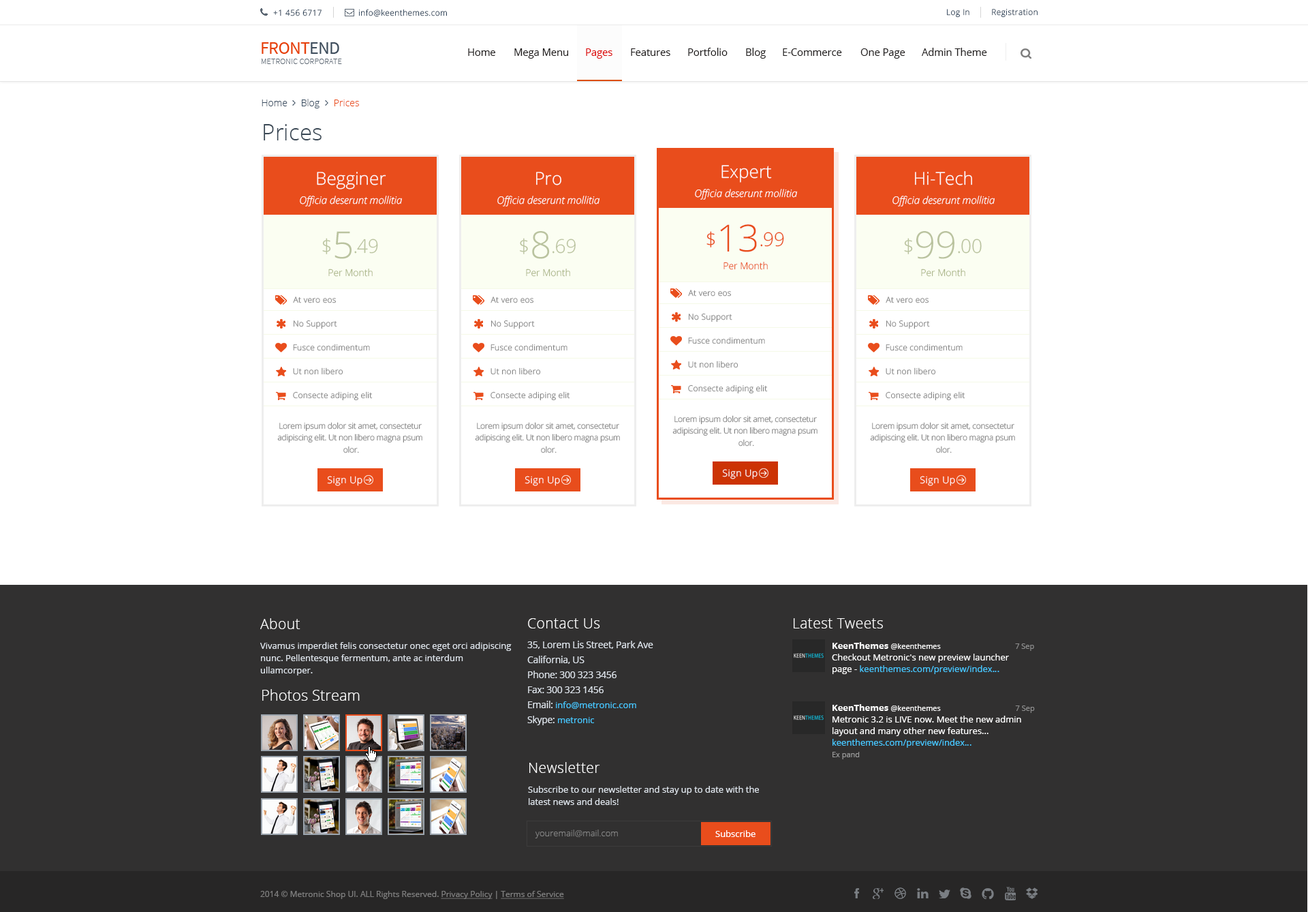
<style>
.page{position:relative;width:1308px;height:912px;background:#ffffff}
.page>*{position:absolute;margin:0}
.t1{font:8.2px "OpenSans-Light";letter-spacing:0.04em;color:#394c60}
.t2{font:10px "OpenSans";color:#1f1c1c}
.t3{font:10px "OpenSans";color:#dd0000}
.t4{font:9.5px "OpenSans-Light";color:#394c60}
.t5{font:9.5px "OpenSans-Light";color:#e94d1c}
.t6{font:22.5px "OpenSans-Light";color:#3a4855}
.t7{font:10.2px/19.1px "OpenSansLight-Italic";color:#fefefe}
.t8{font:17.7px "OpenSans-Light";color:#fefefe}
.t9{font:19.1px "OpenSans-Light";color:#bac39f}
.t10{font:19.1px "OpenSans-Light";letter-spacing:-0.02em;color:#bac39f}
.t11{font:37.5px "OpenSans-Light";color:#bac39f}
.t12{font:37.5px "OpenSans-Light";color:#e94d1c}
.t13{font:19.1px "OpenSans-Light";letter-spacing:-0.02em;color:#e94d1c}
.t14{font:19.1px "OpenSans-Light";color:#e94d1c}
.t15{font:9.5px "OpenSans-Light";color:#a9b486}
.t16{font:8.2px "OpenSans-Light";letter-spacing:0.02em;color:#888888}
.t17{font:8.2px "OpenSans-Light";color:#888888}
.t18{font:8.2px/12px "OpenSans-Light";letter-spacing:-0.02em;color:#888888}
.t19{font:9.5px "OpenSans-Light";letter-spacing:0.04em;color:#ffffff}
.t20{font:14.3px "OpenSans-Light";letter-spacing:0.02em;color:#fefefe}
.t21{font:14.3px "OpenSans-Light";letter-spacing:0.02em;color:#ffffff}
.t22{font:8.9px/12.3px "OpenSans";color:#dee4eb}
.t23{font:9.5px/15px "OpenSans";letter-spacing:-0.02em;color:#dee4eb}
.t24{font:8.9px/11.6px "OpenSans";color:#47c7ff}
.t25{font:8.9px/11.6px "OpenSans";color:#ffffff}
.t26{font:8.9px/11.6px "OpenSans-Bold";color:#ffffff}
.t27{font:7.5px/11.6px "OpenSans";color:#ffffff}
.t28{font:7.5px/11.6px "OpenSans";color:#8d8d8d}
.t29{font:15px "OpenSans-Light";color:#fefefe}
.t30{font:7.5px/11.6px "OpenSans";color:#999999}
.t31{font:8.9px "OpenSans-Light";color:#858585}
.t32{font:8.9px "OpenSans";color:#ffffff}
.t33{font:8.2px "OpenSans";color:#7f7f7f}
.t34{font:8.2px "OpenSans";color:#7f7f7f;text-decoration:underline}
</style>
<div class="page">
<p class="t1" style="left:273px;top:9px;width:174px;height:8px">+1 456 6717                info@keenthemes.com</p>
<p class="t1" style="left:947px;top:9px;width:91px;height:9px">Log In        Registration</p>
<p class="t2" style="left:468px;top:48px;width:27px;height:8px">Home</p>
<p class="t2" style="left:514px;top:48px;width:54px;height:11px">Mega Menu</p>
<p class="t3" style="left:586px;top:48px;width:26px;height:11px">Pages</p>
<p class="t2" style="left:631px;top:48px;width:39px;height:8px">Features</p>
<p class="t2" style="left:688px;top:48px;width:40px;height:8px">Portfolio</p>
<p class="t2" style="left:746px;top:48px;width:20px;height:11px">Blog</p>
<p class="t2" style="left:783px;top:48px;width:59px;height:8px">E-Commerce</p>
<p class="t2" style="left:860px;top:48px;width:45px;height:11px">One Page</p>
<p class="t2" style="left:922px;top:48px;width:65px;height:8px">Admin Theme</p>
<p class="t4" style="left:262px;top:99px;width:97px;height:9px">Home     Blog      <span class="t5">Prices</span></p>
<p class="t6" style="left:264px;top:124px;width:58px;height:16px">Prices</p>
<p class="t7" style="left:300px;top:172px;width:102px;height:34px;text-align:center"><span class="t8">Begginer<br></span>Officia deserunt mollitia</p>
<p class="t7" style="left:497px;top:172px;width:103px;height:34px;text-align:center"><span class="t8">Pro<br></span>Officia deserunt mollitia</p>
<p class="t7" style="left:695px;top:165px;width:102px;height:35px;text-align:center"><span class="t8">Expert<br></span>Officia deserunt mollitia</p>
<p class="t7" style="left:893px;top:171px;width:102px;height:35px;text-align:center"><span class="t8">Hi-Tech<br></span>Officia deserunt mollitia</p>
<p class="t9" style="left:322px;top:231px;width:56px;height:28px"><span class="t10">$</span><span class="t11">5</span>.49</p>
<p class="t9" style="left:520px;top:231px;width:56px;height:28px"><span class="t10">$</span><span class="t11">8</span>.69</p>
<p class="t12" style="left:707px;top:224px;width:77px;height:28px"><span class="t13">$</span>13<span class="t14">.</span><span class="t14">99</span></p>
<p class="t11" style="left:904px;top:231px;width:78px;height:28px"><span class="t10">$</span>99<span class="t9">.</span><span class="t9">00</span></p>
<p class="t15" style="left:328px;top:268px;width:45px;height:9px">Per Month</p>
<p class="t15" style="left:526px;top:268px;width:44px;height:9px">Per Month</p>
<p class="t5" style="left:724px;top:262px;width:44px;height:8px">Per Month</p>
<p class="t15" style="left:921px;top:268px;width:44px;height:9px">Per Month</p>
<p class="t16" style="left:688px;top:290px;width:43px;height:6px"><span class="t17"> </span>At vero eos</p>
<p class="t16" style="left:293px;top:296px;width:43px;height:7px"><span class="t17"> </span>At vero eos</p>
<p class="t16" style="left:491px;top:296px;width:42px;height:7px"><span class="t17"> </span>At vero eos</p>
<p class="t16" style="left:886px;top:296px;width:43px;height:7px"><span class="t17"> </span>At vero eos</p>
<p class="t16" style="left:689px;top:313px;width:43px;height:9px"><span class="t17"> </span> No Support</p>
<p class="t16" style="left:294px;top:320px;width:43px;height:9px"><span class="t17"> </span> No Support</p>
<p class="t16" style="left:491px;top:320px;width:44px;height:9px"><span class="t17"> </span> No Support</p>
<p class="t16" style="left:886px;top:320px;width:44px;height:9px"><span class="t17"> </span> No Support</p>
<p class="t16" style="left:688px;top:337px;width:77px;height:7px">Fusce condimentum</p>
<p class="t16" style="left:293px;top:343px;width:77px;height:8px">Fusce condimentum</p>
<p class="t16" style="left:491px;top:343px;width:77px;height:8px">Fusce condimentum</p>
<p class="t16" style="left:886px;top:343px;width:77px;height:8px">Fusce condimentum</p>
<p class="t16" style="left:688px;top:360px;width:50px;height:8px">Ut non libero</p>
<p class="t16" style="left:293px;top:367px;width:50px;height:8px">Ut non libero</p>
<p class="t16" style="left:491px;top:367px;width:49px;height:8px">Ut non libero</p>
<p class="t16" style="left:886px;top:367px;width:49px;height:8px">Ut non libero</p>
<p class="t16" style="left:688px;top:384px;width:80px;height:10px">Consecte adiping elit</p>
<p class="t16" style="left:293px;top:391px;width:80px;height:10px">Consecte adiping elit</p>
<p class="t16" style="left:491px;top:391px;width:79px;height:10px">Consecte adiping elit</p>
<p class="t16" style="left:886px;top:391px;width:79px;height:10px">Consecte adiping elit</p>
<p class="t18" style="left:277px;top:422px;width:145px;height:31px;text-align:center">Lorem ipsum dolor sit amet, consectetur <br>adipiscing elit. Ut non libero magna psum <br>olor.</p>
<p class="t18" style="left:475px;top:422px;width:145px;height:31px;text-align:center">Lorem ipsum dolor sit amet, consectetur <br>adipiscing elit. Ut non libero magna psum <br>olor.</p>
<p class="t18" style="left:672px;top:415px;width:146px;height:31px;text-align:center">Lorem ipsum dolor sit amet, consectetur <br>adipiscing elit. Ut non libero magna psum <br>olor.</p>
<p class="t18" style="left:870px;top:422px;width:145px;height:31px;text-align:center">Lorem ipsum dolor sit amet, consectetur <br>adipiscing elit. Ut non libero magna psum <br>olor.</p>
<p class="t19" style="left:722px;top:469px;width:36px;height:10px">Sign Up</p>
<p class="t19" style="left:327px;top:476px;width:35px;height:10px">Sign Up</p>
<p class="t19" style="left:525px;top:476px;width:35px;height:10px">Sign Up</p>
<p class="t19" style="left:920px;top:476px;width:35px;height:10px">Sign Up</p>
<p class="t20" style="left:260px;top:618px;width:40px;height:11px">About</p>
<p class="t21" style="left:528px;top:618px;width:72px;height:10px">Contact Us</p>
<p class="t21" style="left:794px;top:618px;width:89px;height:10px">Latest Tweets</p>
<p class="t22" style="left:260px;top:642px;width:252px;height:33px">Vivamus imperdiet felis consectetur onec eget orci adipiscing nunc. Pellentesque fermentum, ante ac interdum ullamcorper.</p>
<p class="t23" style="left:527px;top:640px;width:126px;height:85px">35, Lorem Lis Street, Park Ave<br>California, US<br>Phone: 300 323 3456<br>Fax: 300 323 1456<br>Email: <span class="t24">info@metronic.com<br></span>Skype: <span class="t24">metronic</span></p>
<p class="t25" style="left:832px;top:642px;width:202px;height:32px"><span class="t26">KeenThemes </span><span class="t27">@keenthemes         </span><span class="t28">7 Sep<br></span>Checkout Metronic's new preview launcher <br>page - <span class="t24">keenthemes.com/preview/index…</span></p>
<p class="t29" style="left:262px;top:689px;width:98px;height:11px">Photos Stream</p>
<p class="t25" style="left:833px;top:704px;width:202px;height:55px"><span class="t26">KeenThemes </span><span class="t27">@keenthemes           </span><span class="t28">7 Sep<br></span>Metronic 3.2 is LIVE now. Meet the new admin layout and many other new features... <span class="t24">keenthemes.com/preview/index…<br></span><span class="t30">Ex pand</span></p>
<p class="t21" style="left:529px;top:762px;width:71px;height:11px">Newsletter</p>
<p class="t22" style="left:528px;top:786px;width:231px;height:19px">Subscribe to our newsletter and stay up to date with the latest news and deals!</p>
<p class="t31" style="left:535px;top:829px;width:83px;height:9px">youremail@mail.com</p>
<p class="t32" style="left:715px;top:830px;width:41px;height:7px">Subscribe</p>
<p class="t33" style="left:260px;top:890px;width:304px;height:9px">2014 © Metronic Shop UI. ALL Rights Reserved. <span class="t34">Privacy Policy</span> | <span class="t34">Terms of Service</span></p>
</div>
